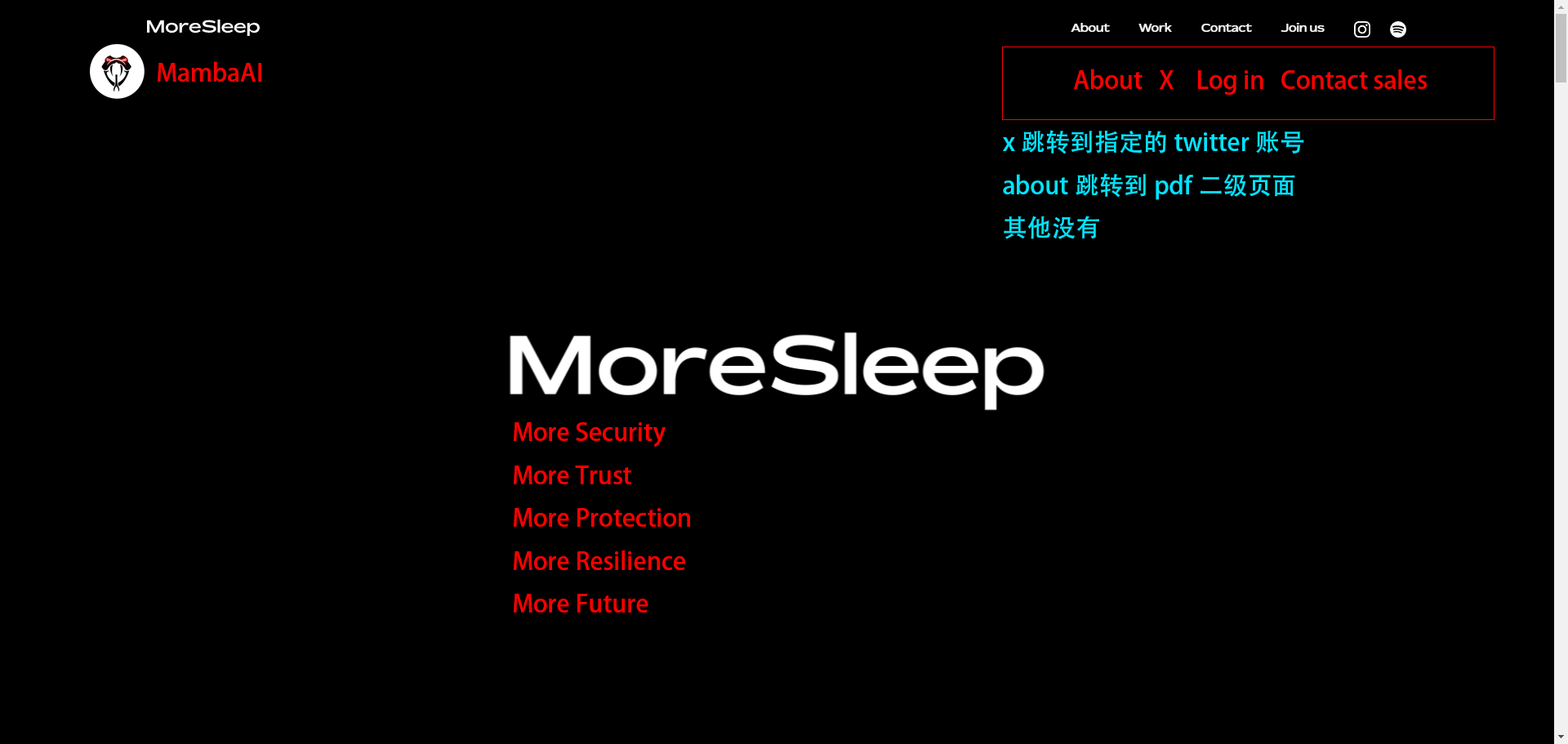
<style>
.page{position:relative;width:1568px;height:744px;background:#000000}
.page>*{position:absolute;margin:0}
.t1{font:24.5px "AdobeHeitiStd-Regular";color:#ff0000}
.t2{font:24.5px "AdobeHeitiStd-Regular";color:#00e4ff}
</style>
<div class="page">
<p class="t1" style="left:158px;top:61px;width:103px;height:21px">MambaAI</p>
<p class="t1" style="left:1074px;top:69px;width:353px;height:26px">About   X    Log in   Contact sales</p>
<p class="t2" style="left:1003px;top:130px;width:301px;height:109px">x跳转到指定的twitter账号<br>about跳转到pdf二级页面<br>其他没有</p>
<p class="t1" style="left:514px;top:422px;width:176px;height:190px">More Security<br>More Trust<br>More Protection<br>More Resilience <br>More Future</p>
</div>
